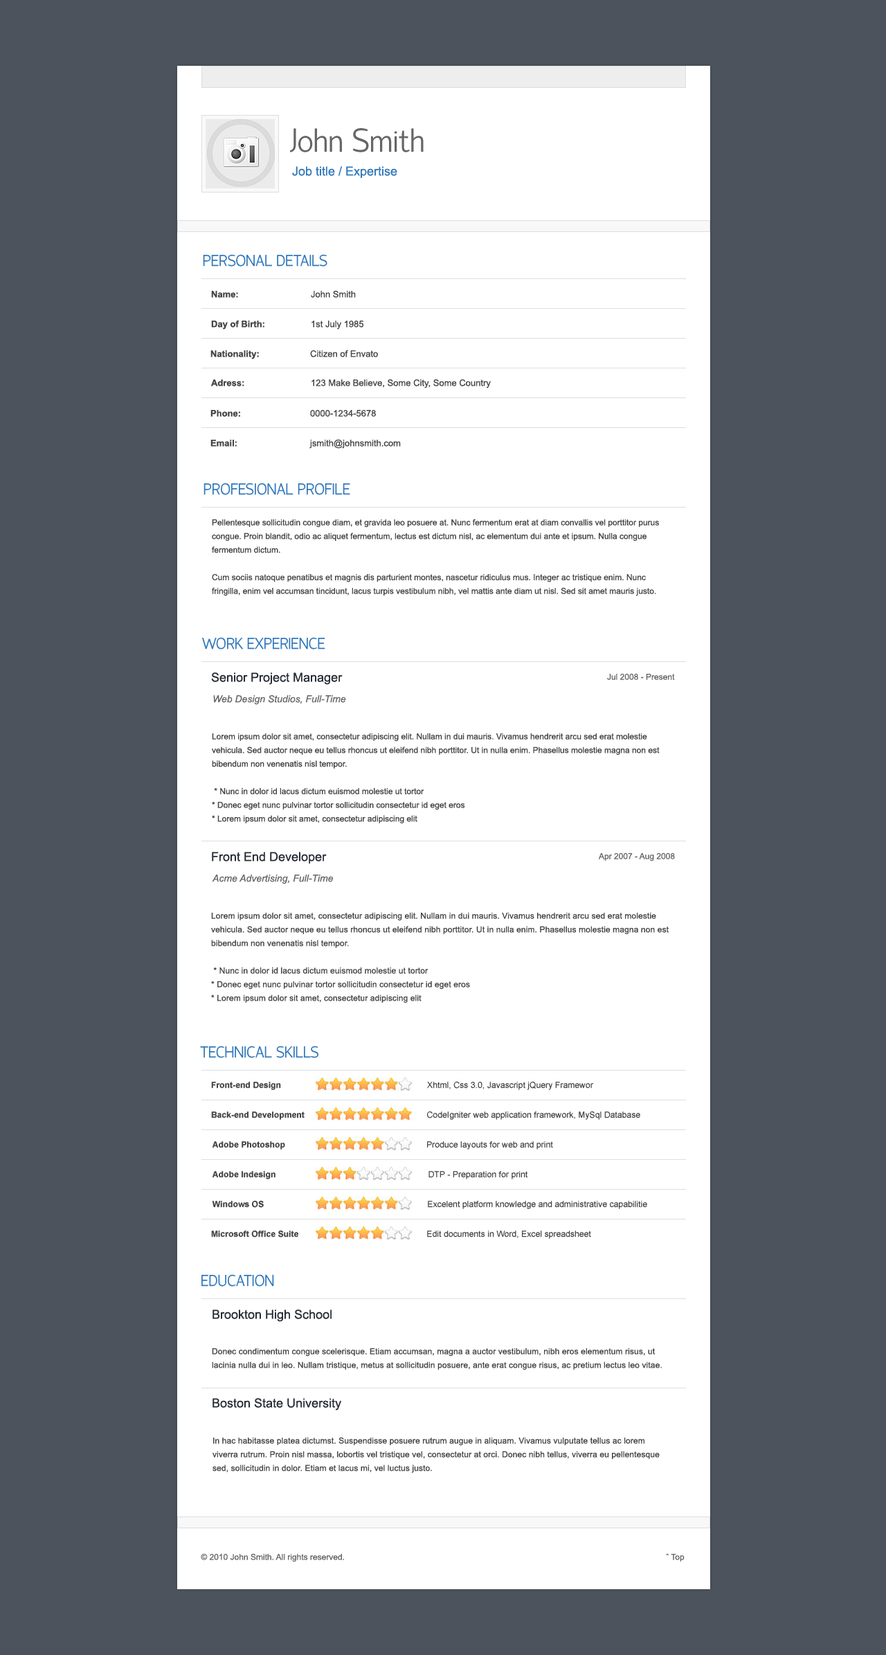
<style>
.page{position:relative;width:886px;height:1655px;background:#ffffff}
.page>*{position:absolute;margin:0}
.t1{font:33.2px "MyriadPro-Regular";color:#666666}
.t2{font:12.5px "ArialMT";color:#3279bb}
.t3{font:15.9px "MyriadPro-Regular";color:#3279bb}
.t4{font:9px "ArialMT";color:#454545}
.t5{font:9px "Arial-BoldMT";color:#454545}
.t6{font:8.3px/13.7px "ArialMT";color:#454545}
.t7{font:12.5px "ArialMT";color:#272d36}
.t8{font:8.3px "ArialMT";color:#666666}
.t9{font:9.7px "Arial-ItalicMT";color:#666666}
.t10{font:8.3px/13.7px "ArialMT";letter-spacing:0.01em;color:#454545}
</style>
<div class="page">
<p class="t1" style="left:289px;top:128px;width:135px;height:24px">John Smith</p>
<p class="t2" style="left:292px;top:166px;width:105px;height:12px">Job title / Expertise</p>
<p class="t3" style="left:203px;top:254px;width:124px;height:13px">PERSONAL DETAILS</p>
<p class="t4" style="left:211px;top:290px;width:145px;height:8px"><span class="t5">Name:</span>    John Smith</p>
<p class="t5" style="left:211px;top:320px;width:153px;height:10px">Day of Birth:  <span class="t4">  1st July 1985</span></p>
<p class="t4" style="left:210px;top:350px;width:168px;height:9px"><span class="t5">Nationality:</span>    Citizen of Envato</p>
<p class="t4" style="left:211px;top:379px;width:280px;height:9px"><span class="t5">Adress: </span>    123 Make Believe, Some City, Some Country</p>
<p class="t4" style="left:210px;top:410px;width:166px;height:7px"><span class="t5">Phone:</span>     0000-1234-5678</p>
<p class="t4" style="left:210px;top:439px;width:191px;height:10px"><span class="t5">Email:</span>     jsmith@johnsmith.com</p>
<p class="t3" style="left:204px;top:483px;width:146px;height:12px">PROFESIONAL PROFILE</p>
<p class="t6" style="left:212px;top:519px;width:447px;height:77px">Pellentesque sollicitudin congue diam, et gravida leo posuere at. Nunc fermentum erat at diam convallis vel porttitor purus <br>congue. Proin blandit, odio ac aliquet fermentum, lectus est dictum nisl, ac elementum dui ante et ipsum. Nulla congue <br>fermentum dictum.<br><br>Cum sociis natoque penatibus et magnis dis parturient montes, nascetur ridiculus mus. Integer ac tristique enim. Nunc <br>fringilla, enim vel accumsan tincidunt, lacus turpis vestibulum nibh, vel mattis ante diam ut nisl. Sed sit amet mauris justo.</p>
<p class="t3" style="left:202px;top:637px;width:123px;height:12px">WORK EXPERIENCE</p>
<p class="t7" style="left:211px;top:672px;width:132px;height:13px">Senior Project Manager</p>
<p class="t8" style="left:607px;top:673px;width:68px;height:7px">Jul 2008 - Present</p>
<p class="t9" style="left:213px;top:695px;width:133px;height:10px">Web Design Studios, Full-Time</p>
<p class="t6" style="left:212px;top:733px;width:448px;height:90px">Lorem ipsum dolor sit amet, consectetur adipiscing elit. Nullam in dui mauris. Vivamus hendrerit arcu sed erat molestie <br>vehicula. Sed auctor neque eu tellus rhoncus ut eleifend nibh porttitor. Ut in nulla enim. Phasellus molestie magna non est <br>bibendum non venenatis nisl tempor.<br><br> * Nunc in dolor id lacus dictum euismod molestie ut tortor<br>* Donec eget nunc pulvinar tortor sollicitudin consectetur id eget eros<br>* Lorem ipsum dolor sit amet, consectetur adipiscing elit</p>
<p class="t7" style="left:212px;top:852px;width:115px;height:11px">Front End Developer</p>
<p class="t8" style="left:598px;top:852px;width:77px;height:9px">Apr 2007 - Aug 2008</p>
<p class="t9" style="left:212px;top:874px;width:122px;height:10px">Acme Advertising, Full-Time</p>
<p class="t10" style="left:211px;top:912px;width:458px;height:90px">Lorem ipsum dolor sit amet, consectetur adipiscing elit. Nullam in dui mauris. Vivamus hendrerit arcu sed erat molestie <br>vehicula. Sed auctor neque eu tellus rhoncus ut eleifend nibh porttitor. Ut in nulla enim. Phasellus molestie magna non est <br>bibendum non venenatis nisl tempor.<br><br> * Nunc in dolor id lacus dictum euismod molestie ut tortor<br>* Donec eget nunc pulvinar tortor sollicitudin consectetur id eget eros<br>* Lorem ipsum dolor sit amet, consectetur adipiscing elit</p>
<p class="t3" style="left:200px;top:1045px;width:118px;height:13px">TECHNICAL SKILLS</p>
<p class="t3" style="left:201px;top:1274px;width:73px;height:12px">EDUCATION</p>
<p class="t7" style="left:213px;top:1309px;width:119px;height:13px">Brookton High School</p>
<p class="t10" style="left:212px;top:1348px;width:450px;height:21px">Donec condimentum congue scelerisque. Etiam accumsan, magna a auctor vestibulum, nibh eros elementum risus, ut <br>lacinia nulla dui in leo. Nullam tristique, metus at sollicitudin posuere, ante erat congue risus, ac pretium lectus leo vitae.</p>
<p class="t7" style="left:213px;top:1398px;width:128px;height:12px">Boston State University</p>
<p class="t10" style="left:213px;top:1437px;width:447px;height:36px">In hac habitasse platea dictumst. Suspendisse posuere rutrum augue in aliquam. Vivamus vulputate tellus ac lorem <br>viverra rutrum. Proin nisl massa, lobortis vel tristique vel, consectetur at orci. Donec nibh tellus, viverra eu pellentesque <br>sed, sollicitudin in dolor. Etiam et lacus mi, vel luctus justo.</p>
<p class="t8" style="left:201px;top:1553px;width:143px;height:9px">© 2010 John Smith. All rights reserved.</p>
<p class="t8" style="left:666px;top:1553px;width:19px;height:8px">ˆ Top</p>
</div>
